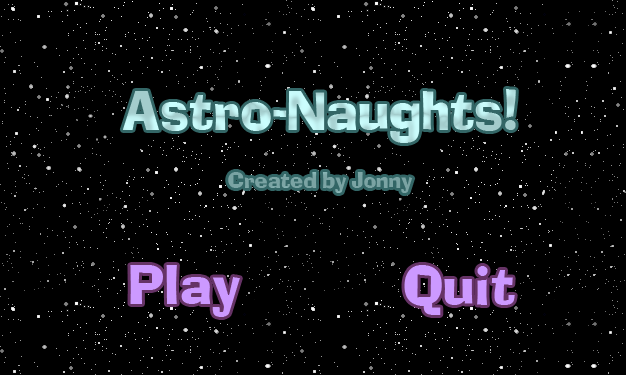
<style>
.page{position:relative;width:626px;height:375px;background:#000000}
.page>*{position:absolute;margin:0}
.t1{font:24px "AdLibICG";color:#99cccc}
.t2{font:60px "AdLibICG";color:#ccffff}
.t3{font:60px "AdLibICG";color:#cc99ff}
</style>
<div class="page">
<p class="t1" style="left:122px;top:89px;width:394px;height:104px;text-align:center"><span class="t2">Astro-Naughts!<br></span><br>Created by Jonny</p>
<p class="t3" style="left:130px;top:265px;width:110px;height:52px">Play</p>
<p class="t3" style="left:404px;top:265px;width:111px;height:50px">Quit</p>
</div>
